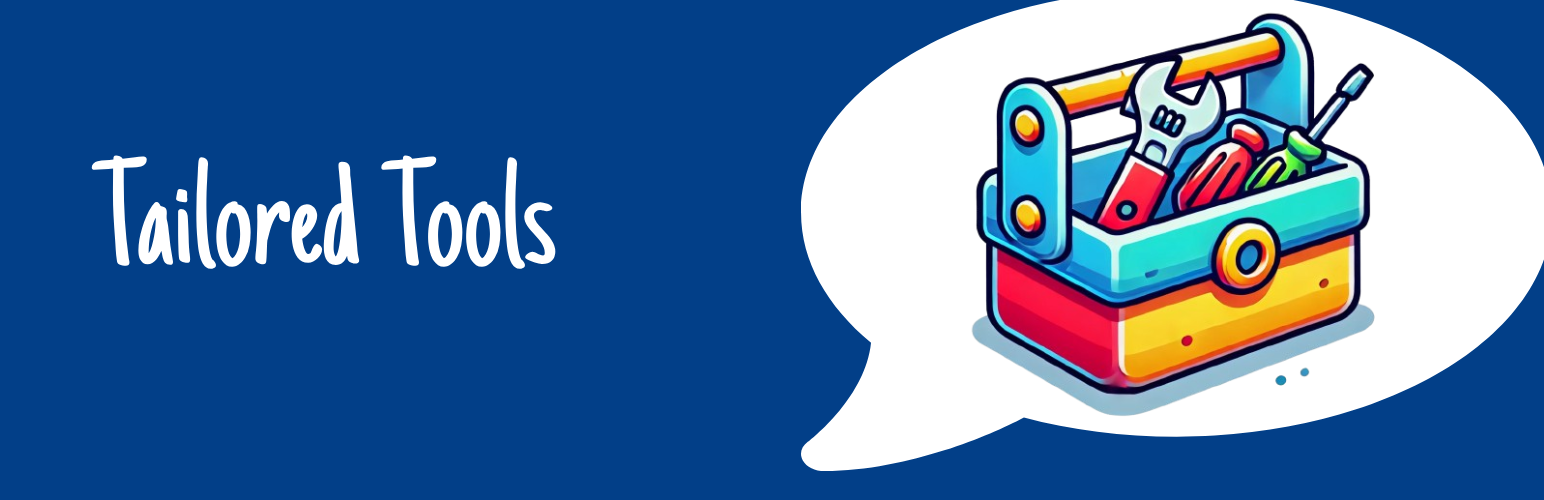
<style>
.page{position:relative;width:1544px;height:500px;background:#023f88}
.page>*{position:absolute;margin:0}
.t1{font:153.8px "JustAnotherHand-Regular";color:#ffffff}
</style>
<div class="page">
<p class="t1" style="left:91px;top:155px;width:465px;height:114px">Tailored Tools</p>
</div>
